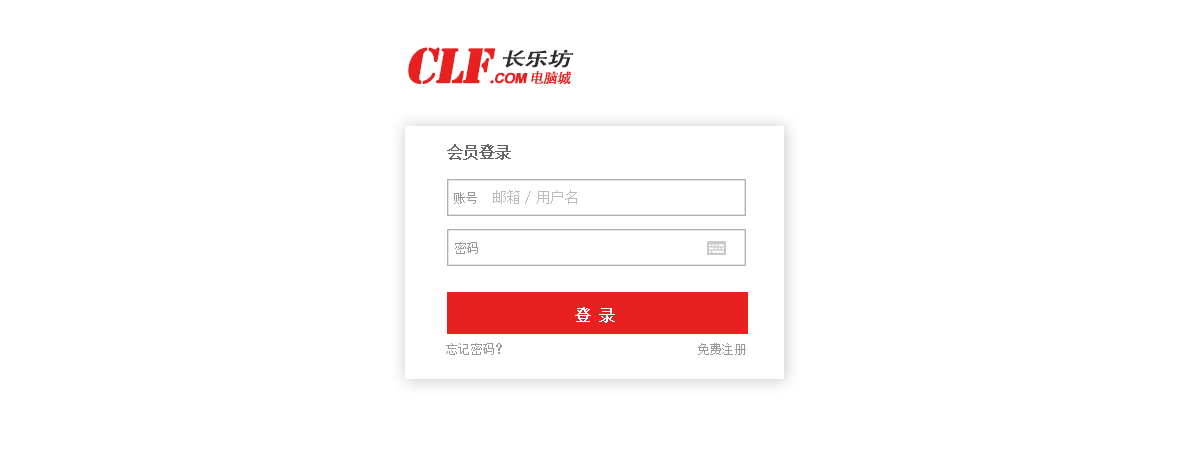
<style>
.page{position:relative;width:1200px;height:460px;background:#ffffff}
.page>*{position:absolute;margin:0}
.t1{font:46px "StencilStd";letter-spacing:-0.05em;color:#e82020;font-weight:bold;font-style:italic}
.t2{font:14px "StencilStd";letter-spacing:-0.05em;color:#e82020;font-weight:bold;font-style:italic}
.t3{font:14px "Arial-BoldMT";letter-spacing:-0.05em;color:#e82020;font-weight:bold;font-style:italic}
.t4{font:14px "AdobeHeitiStd-Regular";letter-spacing:-0.05em;color:#e82020;font-weight:bold;font-style:italic}
.t5{font:18.9px "AdobeHeitiStd-Regular";letter-spacing:-0.05em;color:#2d2d2d;font-weight:bold;font-style:italic;scale:1.26 1}
.t6{font:12px "SimSun";letter-spacing:-0.05em;color:#666666;font-weight:bold}
.t7{font:13.3px "SimSun";letter-spacing:-0.05em;color:#999999}
.t8{font:14.7px "SimSun";letter-spacing:-0.05em;color:#bbbbbb}
.t9{font:16px "SimSun";letter-spacing:-0.05em;color:#ffffff;font-weight:bold}
</style>
<div class="page">
<p class="t1" style="left:408px;top:47px;width:164px;height:38px">CLF<span class="t2">.</span><span class="t3">COM</span><span class="t4">电脑城</span></p>
<p class="t5" style="left:503px;top:49px;width:71px;height:19px">长乐坊</p>
<p class="t6" style="left:447px;top:144px;width:64px;height:16px">会员登录</p>
<p class="t7" style="left:454px;top:192px;width:23px;height:12px">账号</p>
<p class="t8" style="left:493px;top:190px;width:84px;height:14px">邮箱/用户名</p>
<p class="t7" style="left:455px;top:242px;width:23px;height:12px">密码</p>
<p class="t9" style="left:575px;top:307px;width:40px;height:16px">登 录</p>
<p class="t7" style="left:446px;top:343px;width:300px;height:12px">忘记密码？                              免费注册</p>
</div>
